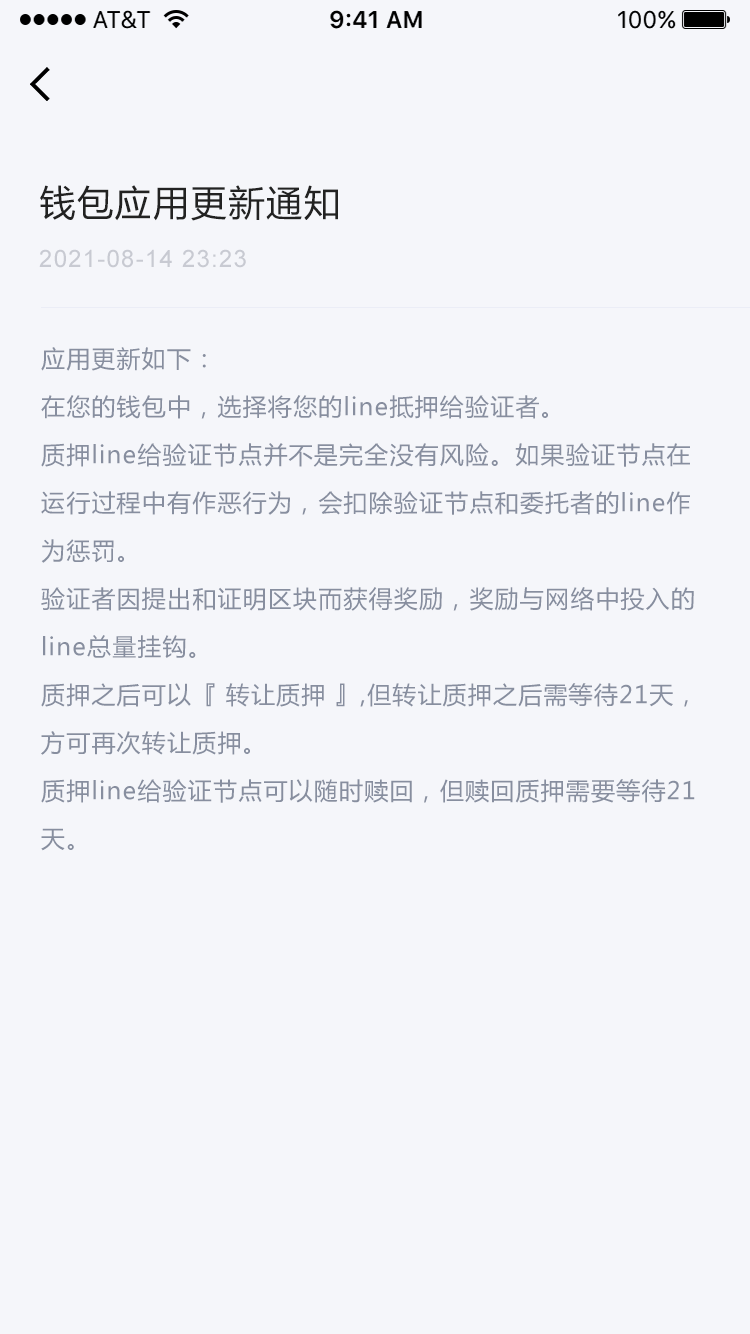
<style>
.page{position:relative;width:750px;height:1334px;background:#f5f6fa}
.page>*{position:absolute;margin:0}
.t1{font:36px "MicrosoftYaHei";letter-spacing:0.05em;color:#222222}
.t2{font:24px "ArialMT";letter-spacing:0.05em;color:#c8cad2}
.t3{font:24px/48px "MicrosoftYaHei";letter-spacing:0.05em;color:#878e9f}
</style>
<div class="page">
<p class="t1" style="left:40px;top:185px;width:298px;height:36px">钱包应用更新通知</p>
<p class="t2" style="left:39px;top:249px;width:207px;height:19px">2021-08-14 23:23</p>
<p class="t3" style="left:41px;top:347px;width:654px;height:504px">应用更新如下：<br>在您的钱包中，选择将您的line抵押给验证者。<br>质押line给验证节点并不是完全没有风险。如果验证节点在运行过程中有作恶行为，会扣除验证节点和委托者的line作为惩罚。<br>验证者因提出和证明区块而获得奖励，奖励与网络中投入的line总量挂钩。<br>质押之后可以『 转让质押 』,但转让质押之后需等待21天，方可再次转让质押。<br>质押line给验证节点可以随时赎回，但赎回质押需要等待21天。</p>
</div>
